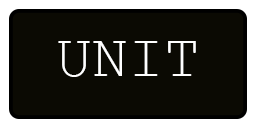
<style>
.page{position:relative;width:256px;height:128px;background:#0b0a03}
.page>*{position:absolute;margin:0}
.t1{font:60px "CourierNewPSMT";color:#ffffff}
</style>
<div class="page">
<p class="t1" style="left:58px;top:41px;width:138px;height:36px">UNIT</p>
</div>
